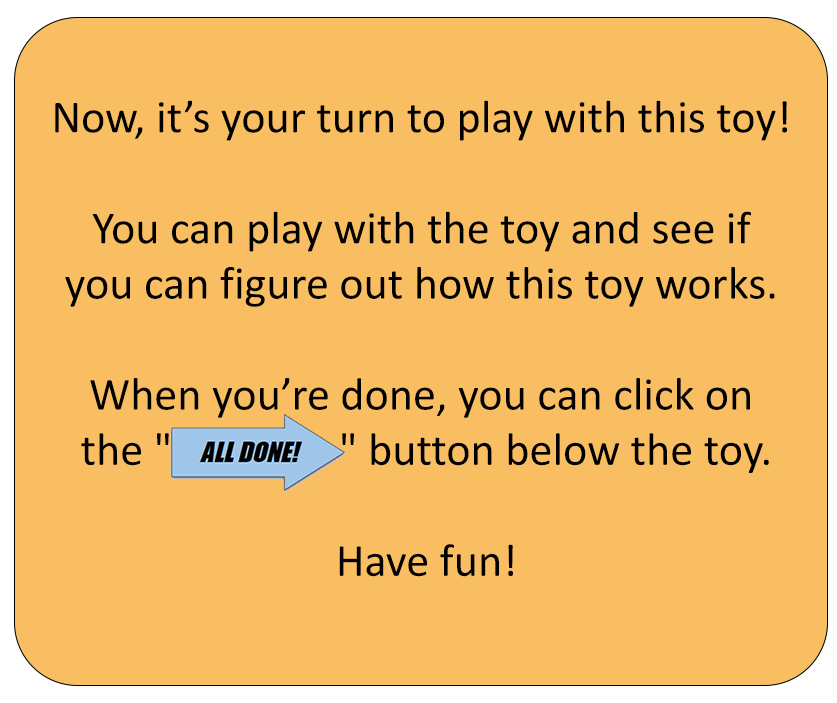
<style>
.page{position:relative;width:837px;height:703px;background:#f8be61}
.page>*{position:absolute;margin:0}
.t1{font:46.2px "Calibri";color:#000000}
</style>
<div class="page">
<p class="t1" style="left:55px;top:100px;width:732px;height:477px;text-align:center">Now, it’s your turn to play with this toy! <br><br>You can play with the toy and see if <br>you can figure out how this toy works. <br><br>When you’re done, you can click on <br>the "                " button below the toy.<br><br>Have fun!</p>
</div>
